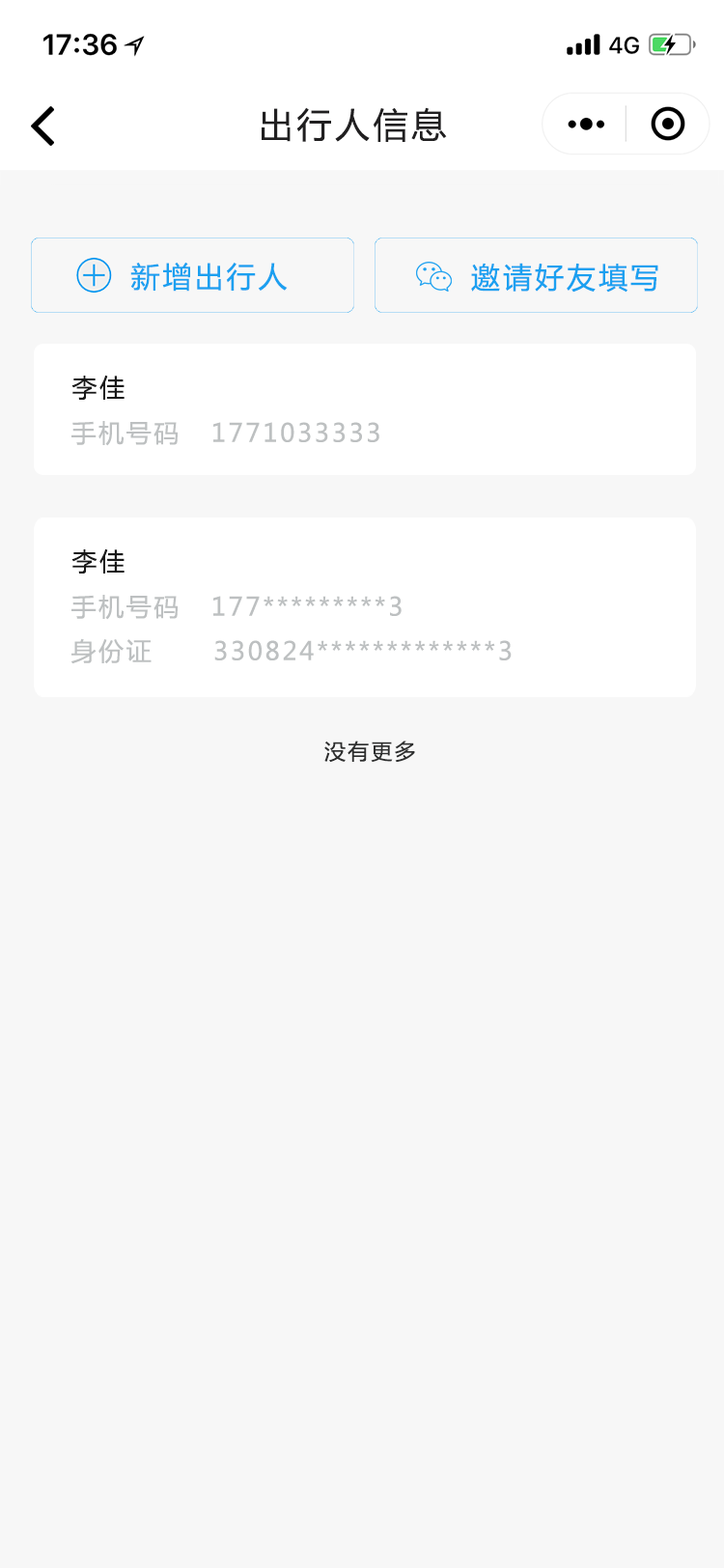
<style>
.page{position:relative;width:724px;height:1568px;background:#f7f7f7}
.page>*{position:absolute;margin:0}
.t1{font:34.8px "MicrosoftYaHei";letter-spacing:0.1em;color:#201f20}
.t2{font:29px "MicrosoftYaHei";letter-spacing:0.1em;color:#1ba0f0}
.t3{font:25.1px "MicrosoftYaHei";letter-spacing:0.1em;color:#181818}
.t4{font:25.1px "MicrosoftYaHei";letter-spacing:0.1em;color:#bdc0c1}
.t5{font:21.2px "MicrosoftYaHei";letter-spacing:0.1em;color:#2d2e2e}
</style>
<div class="page">
<p class="t1" style="left:262px;top:107px;width:185px;height:35px">出行人信息</p>
<p class="t2" style="left:130px;top:263px;width:158px;height:29px">新增出行人</p>
<p class="t2" style="left:471px;top:263px;width:187px;height:30px">邀请好友填写</p>
<p class="t3" style="left:71px;top:375px;width:54px;height:25px">李佳</p>
<p class="t4" style="left:71px;top:421px;width:308px;height:25px">手机号码   1771033333</p>
<p class="t3" style="left:71px;top:548px;width:54px;height:26px">李佳</p>
<p class="t4" style="left:71px;top:595px;width:331px;height:25px">手机号码   177*********3</p>
<p class="t4" style="left:71px;top:638px;width:441px;height:26px">身份证      330824*************3</p>
<p class="t5" style="left:324px;top:741px;width:91px;height:22px">没有更多</p>
</div>
